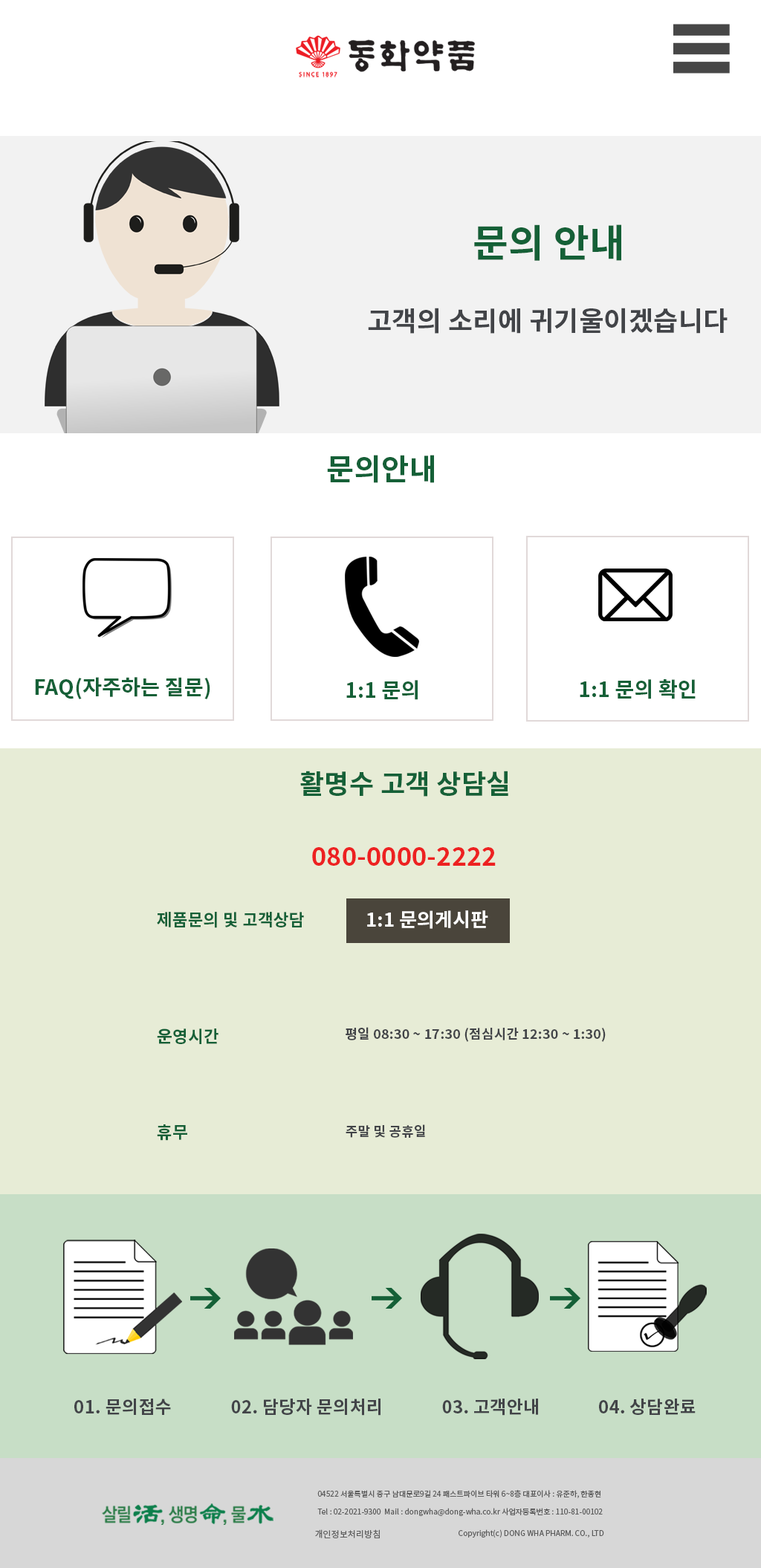
<style>
.page{position:relative;width:761px;height:1568px;background:#ffffff}
.page>*{position:absolute;margin:0}
.t1{font:38.6px "NotoSansKR-Bold";letter-spacing:0.01em;color:#156037}
.t2{font:26.7px "NotoSansKR-Bold";letter-spacing:0.01em;color:#424448}
.t3{font:29.7px "NotoSansKR-Bold";letter-spacing:0.01em;color:#156037}
.t4{font:20.8px "NotoSansKR-Bold";letter-spacing:0.01em;color:#156037}
.t5{font:26.7px "NotoSansKR-Bold";letter-spacing:0.01em;color:#156037}
.t6{font:25.3px "NotoSansKR-Bold";letter-spacing:0.01em;color:#ed2121}
.t7{font:16.7px "NotoSansKR-Bold";letter-spacing:0.01em;color:#156037}
.t8{font:19.1px "NotoSansKR-Bold";letter-spacing:0.01em;color:#ffffff}
.t9{font:13.4px "NotoSansKR-Bold";letter-spacing:0.01em;color:#424448}
.t10{font:17.8px "NotoSansKR-Bold";letter-spacing:0.01em;color:#424448}
.t11{font:7.4px "NotoSansKR-Regular";letter-spacing:0.01em;color:#5d5d5d}
.t12{font:8.9px "NotoSansKR-Regular";letter-spacing:0.01em;color:#5d5d5d}
</style>
<div class="page">
<p class="t1" style="left:474px;top:224px;width:147px;height:37px">문의 안내</p>
<p class="t2" style="left:368px;top:308px;width:359px;height:26px">고객의 소리에 귀기울이겠습니다</p>
<p class="t3" style="left:327px;top:455px;width:107px;height:28px">문의안내</p>
<p class="t4" style="left:35px;top:677px;width:175px;height:22px">FAQ(자주하는 질문)</p>
<p class="t4" style="left:346px;top:680px;width:72px;height:20px">1:1 문의</p>
<p class="t4" style="left:579px;top:679px;width:116px;height:20px">1:1 문의 확인</p>
<p class="t5" style="left:300px;top:770px;width:208px;height:26px">활명수 고객 상담실</p>
<p class="t6" style="left:312px;top:847px;width:184px;height:18px">080-0000-2222</p>
<p class="t7" style="left:157px;top:912px;width:147px;height:16px">제품문의 및 고객상담</p>
<p class="t8" style="left:367px;top:910px;width:121px;height:19px">1:1 문의게시판</p>
<p class="t7" style="left:157px;top:1028px;width:61px;height:16px">운영시간</p>
<p class="t9" style="left:345px;top:1027px;width:260px;height:15px">평일 08:30 ~ 17:30 (점심시간 12:30 ~ 1:30)</p>
<p class="t7" style="left:157px;top:1124px;width:30px;height:16px">휴무</p>
<p class="t9" style="left:345px;top:1124px;width:80px;height:13px">주말 및 공휴일</p>
<p class="t10" style="left:74px;top:1398px;width:97px;height:16px">01. 문의접수</p>
<p class="t10" style="left:231px;top:1398px;width:149px;height:17px">02. 담당자 문의처리</p>
<p class="t10" style="left:442px;top:1398px;width:96px;height:17px">03. 고객안내</p>
<p class="t10" style="left:599px;top:1398px;width:96px;height:16px">04. 상담완료</p>
<p class="t11" style="left:317px;top:1489px;width:285px;height:26px">04522 서울특별시 중구 남대문로9길 24 패스트파이브 타워 6~8층 대표이사 : 유준하, 한종현<br><br>Tel : 02-2021-9300  Mail : dongwha@dong-wha.co.kr 사업자등록번호 : 110-81-00102</p>
<p class="t12" style="left:315px;top:1529px;width:65px;height:9px">개인정보처리방침</p>
<p class="t11" style="left:458px;top:1529px;width:146px;height:8px">Copyright(c) DONG WHA PHARM. CO., LTD</p>
</div>
